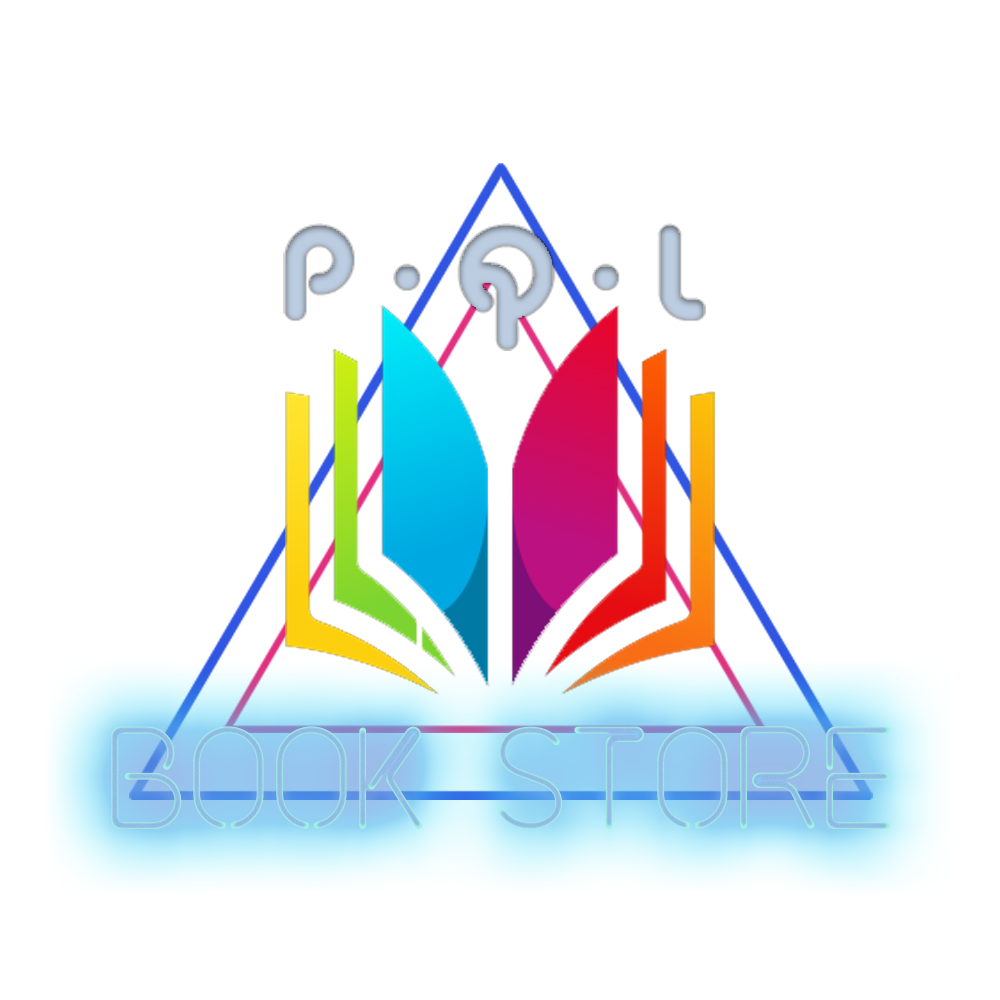
<style>
.page{position:relative;width:1000px;height:1000px;background:#ffffff}
.page>*{position:absolute;margin:0}
.t1{font:127.8px "NeonTubes2-Regular";color:#94c1e5}
</style>
<div class="page">
<p class="t1" style="left:111px;top:726px;width:780px;height:103px">BOOK STORE</p>
</div>
